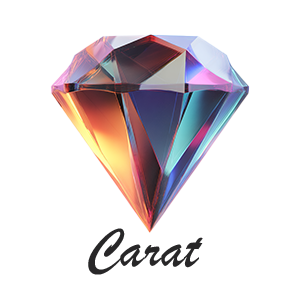
<style>
.page{position:relative;width:300px;height:300px;background:#ffffff}
.page>*{position:absolute;margin:0}
.t1{font:57.5px "BrushScriptMT";color:#282728}
</style>
<div class="page">
<p class="t1" style="left:88px;top:228px;width:115px;height:47px">Carat</p>
</div>
